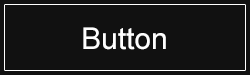
<style>
.page{position:relative;width:250px;height:75px;background:#111111}
.page>*{position:absolute;margin:0}
.t1{font:30px "ArialMT";color:#ffffff}
</style>
<div class="page">
<p class="t1" style="left:83px;top:27px;width:83px;height:23px">Button</p>
</div>
